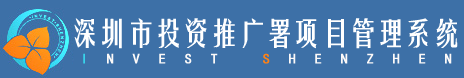
<style>
.page{position:relative;width:464px;height:78px;background:#3d70a7}
.page>*{position:absolute;margin:0}
.t1{font:30px "FZYTK--GBK1-0";letter-spacing:-0.1em;color:#ffffff;font-weight:bold}
.t2{font:14px "SimHei";letter-spacing:1.33em;color:#fcf9f8;font-weight:bold}
.t3{font:14px "SimHei";letter-spacing:1.33em;color:#38d3ea;font-weight:bold}
.t4{font:14px "SimHei";letter-spacing:1.33em;color:#ff8115;font-weight:bold}
</style>
<div class="page">
<p class="t1" style="left:74px;top:18px;width:384px;height:31px">深圳市投资推广署项目管理系统</p>
<p class="t2" style="left:83px;top:53px;width:369px;height:11px"><span class="t3">I</span>NVEST <span class="t4">S</span>HENZHEN</p>
</div>
